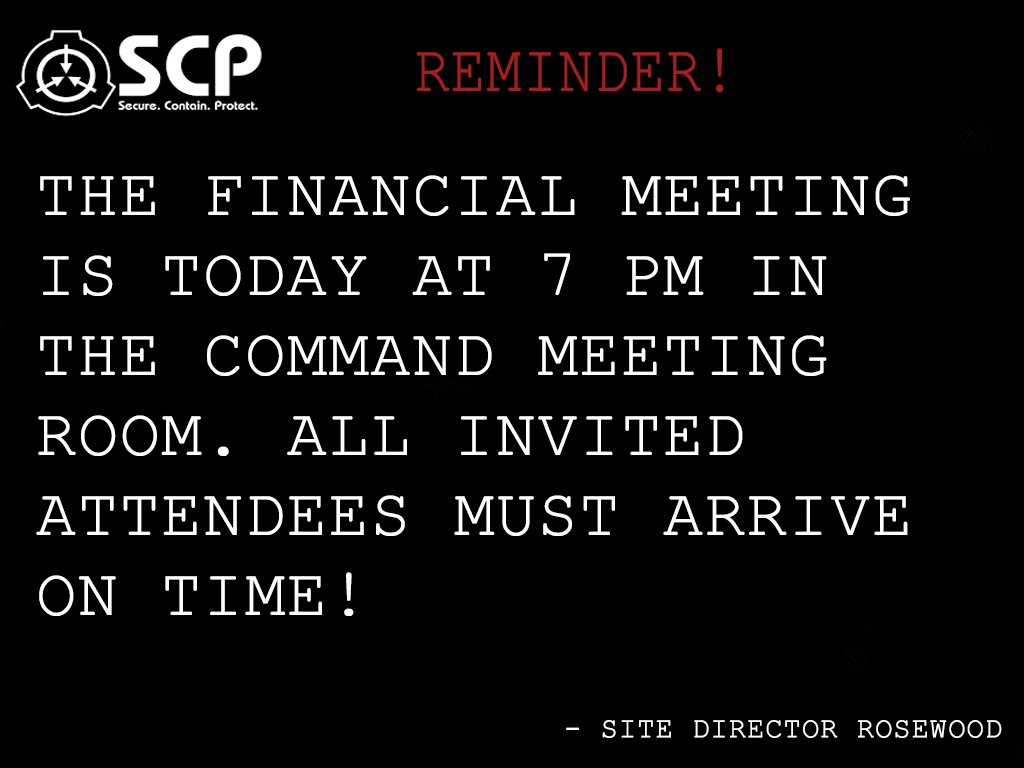
<style>
.page{position:relative;width:1024px;height:768px;background:#000000}
.page>*{position:absolute;margin:0}
.t1{font:66.7px "CourierNewPSMT";color:#aa1d1d;text-transform:uppercase;font-weight:bold;scale:0.86 1}
.t2{font:66.7px "CourierNewPSMT";color:#ffffff;text-transform:uppercase;font-weight:bold}
.t3{font:29.2px "CourierNewPSMT";color:#ffffff;text-transform:uppercase;font-weight:bold}
</style>
<div class="page">
<p class="t1" style="left:417px;top:48px;width:306px;height:44px">Reminder!</p>
<p class="t2" style="left:36px;top:175px;width:874px;height:441px">The financial meeting is today at 7 PM in the command meeting room. All invited attendees must arrive on time!</p>
<p class="t3" style="left:566px;top:720px;width:436px;height:18px">- Site Director Rosewood</p>
</div>
